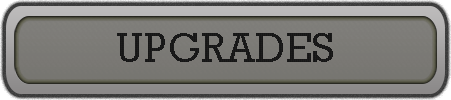
<style>
.page{position:relative;width:451px;height:100px}
.page>*{position:absolute;margin:0}
.t1{font:41.7px "Rockwell";color:#171717}
</style>
<div class="page">
<p class="t1" style="left:117px;top:33px;width:216px;height:29px">UPGRADES</p>
</div>
